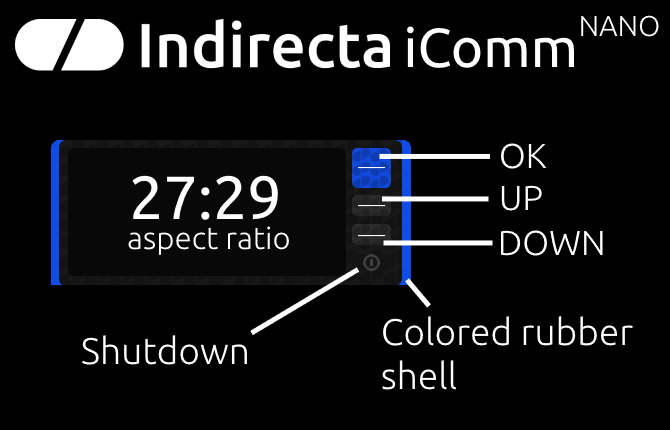
<style>
.page{position:relative;width:670px;height:430px;background:#000000}
.page>*{position:absolute;margin:0}
.t1{font:28.8px "Ubuntu-Light";color:#ffffff}
.t2{font:55.1px "Ubuntu-Regular";color:#ffffff}
.t3{font:34.7px "Ubuntu-Light";color:#ffffff}
.t4{font:61px "Ubuntu-Regular";color:#ffffff}
.t5{font:31.3px "Ubuntu-Light";color:#ffffff}
.t6{font:37.2px "Ubuntu-Light";color:#ffffff}
</style>
<div class="page">
<p class="t1" style="left:581px;top:15px;width:78px;height:22px">NANO</p>
<p class="t2" style="left:407px;top:26px;width:167px;height:42px">iComm</p>
<p class="t3" style="left:501px;top:143px;width:46px;height:26px">OK</p>
<p class="t4" style="left:132px;top:175px;width:146px;height:45px">27:29</p>
<p class="t3" style="left:501px;top:185px;width:41px;height:26px">UP</p>
<p class="t5" style="left:128px;top:226px;width:161px;height:29px">aspect ratio</p>
<p class="t3" style="left:500px;top:230px;width:103px;height:26px">DOWN</p>
<p class="t6" style="left:382px;top:316px;width:251px;height:74px">Colored rubber<br>shell</p>
<p class="t6" style="left:82px;top:335px;width:165px;height:30px">Shutdown</p>
</div>
